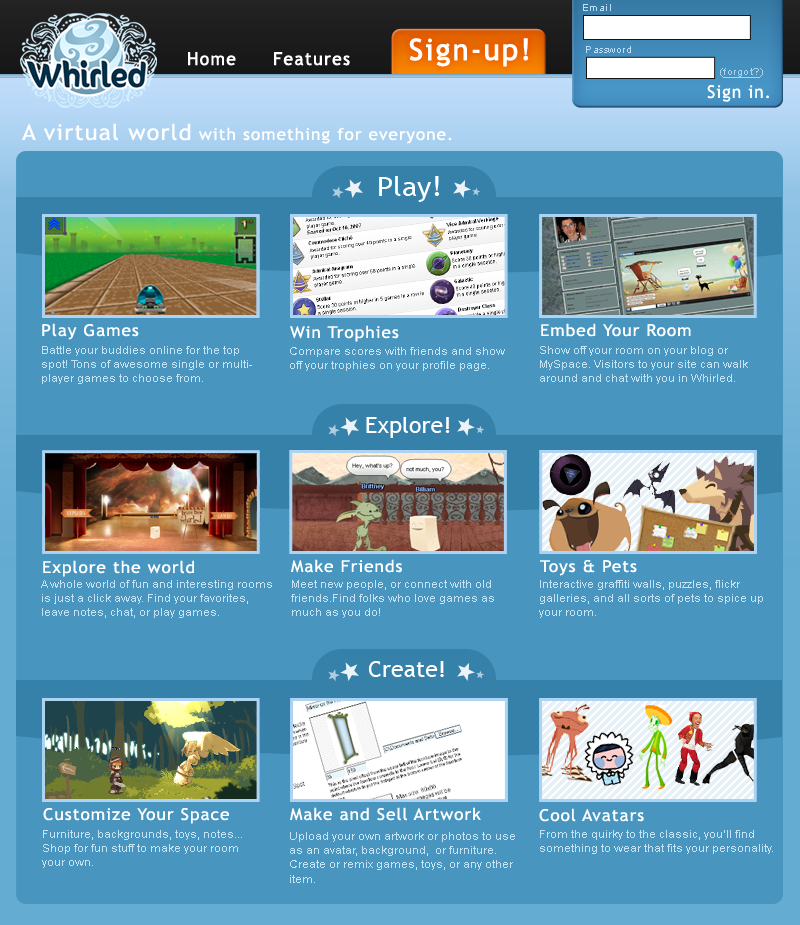
<style>
.page{position:relative;width:800px;height:925px;background:#4896c0}
.page>*{position:absolute;margin:0}
.t1{font:9.8px "ArialMT";letter-spacing:0.05em;color:#bfdcf9}
.t2{font:29.4px "TrebuchetMS";letter-spacing:0.05em;color:#ffffff;font-weight:bold}
.t3{font:17.6px "TrebuchetMS";letter-spacing:0.05em;color:#ffffff;font-weight:bold}
.t4{font:9.8px "ArialMT";letter-spacing:0.05em;color:#aed4eb;text-decoration:underline}
.t5{font:9.8px "ArialMT";letter-spacing:0.05em;color:#aed4eb}
.t6{font:17.6px "TrebuchetMS";letter-spacing:0.05em;color:#ffffff}
.t7{font:16.4px "TrebuchetMS";letter-spacing:0.05em;color:#ffffff;scale:1.07 1}
.t8{font:21.8px "TrebuchetMS";letter-spacing:0.05em;color:#ffffff;scale:1.07 1}
.t9{font:27.3px "TrebuchetMS";color:#ffffff;scale:1.07 1}
.t10{font:10.9px "ArialMT";color:#c4e3f5;scale:1.07 1}
.t11{font:21.8px "TrebuchetMS";color:#ffffff;scale:1.07 1}
</style>
<div class="page">
<p class="t1" style="left:583px;top:4px;width:28px;height:7px">Email</p>
<p class="t2" style="left:409px;top:38px;width:120px;height:29px">Sign-up!</p>
<p class="t3" style="left:188px;top:52px;width:48px;height:14px">Home</p>
<p class="t3" style="left:274px;top:52px;width:76px;height:14px">Features</p>
<p class="t1" style="left:586px;top:46px;width:45px;height:7px">Password</p>
<p class="t4" style="left:720px;top:68px;width:43px;height:10px"><span class="t5">(</span>forgot?<span class="t5">)</span></p>
<p class="t6" style="left:707px;top:85px;width:62px;height:17px">Sign in.</p>
<p class="t7" style="left:22px;top:123px;width:430px;height:21px"><span class="t8">A virtual world</span> with something for everyone.</p>
<p class="t9" style="left:379px;top:176px;width:60px;height:26px">Play!</p>
<p class="t7" style="left:42px;top:323px;width:97px;height:17px">Play Games</p>
<p class="t7" style="left:290px;top:325px;width:109px;height:17px">Win Trophies</p>
<p class="t7" style="left:541px;top:323px;width:150px;height:14px">Embed Your Room</p>
<p class="t10" style="left:42px;top:346px;width:210px;height:38px">Battle your buddies online for the top spot! Tons of awesome single or multiplayer games to choose from.</p>
<p class="t10" style="left:290px;top:347px;width:215px;height:24px">Compare scores with friends and show off your trophies on your profile page.</p>
<p class="t10" style="left:540px;top:346px;width:208px;height:38px">Show off your room on your blog or MySpace. Visitors to your site can walk around and chat with you in Whirled.</p>
<p class="t11" style="left:366px;top:417px;width:84px;height:21px">Explore!</p>
<p class="t7" style="left:43px;top:560px;width:151px;height:17px">Explore the world</p>
<p class="t7" style="left:291px;top:559px;width:111px;height:14px">Make Friends</p>
<p class="t7" style="left:540px;top:560px;width:97px;height:16px">Toys &amp; Pets</p>
<p class="t10" style="left:41px;top:580px;width:231px;height:38px">A whole world of fun and interesting rooms is just a click away. Find your favorites, leave notes, chat, or play games.</p>
<p class="t10" style="left:291px;top:580px;width:203px;height:38px">Meet new people, or connect with old friends.Find folks who love games as much as you do!</p>
<p class="t10" style="left:539px;top:580px;width:224px;height:38px">Interactive graffiti walls, puzzles, flickr galleries, and all sorts of pets to spice up your room.</p>
<p class="t11" style="left:368px;top:661px;width:76px;height:16px">Create!</p>
<p class="t7" style="left:43px;top:808px;width:186px;height:16px">Customize Your Space</p>
<p class="t7" style="left:290px;top:807px;width:191px;height:14px">Make and Sell Artwork</p>
<p class="t7" style="left:539px;top:808px;width:105px;height:14px">Cool Avatars</p>
<p class="t10" style="left:42px;top:830px;width:200px;height:38px">Furniture, backgrounds, toys, notes... Shop for fun stuff to make your room your own.</p>
<p class="t10" style="left:290px;top:832px;width:225px;height:51px">Upload your own artwork or photos to use as an avatar, background,  or furniture. Create or remix games, toys, or any other item.</p>
<p class="t10" style="left:540px;top:830px;width:233px;height:24px">From the quirky to the classic, you’ll find something to wear that fits your personality.</p>
</div>
